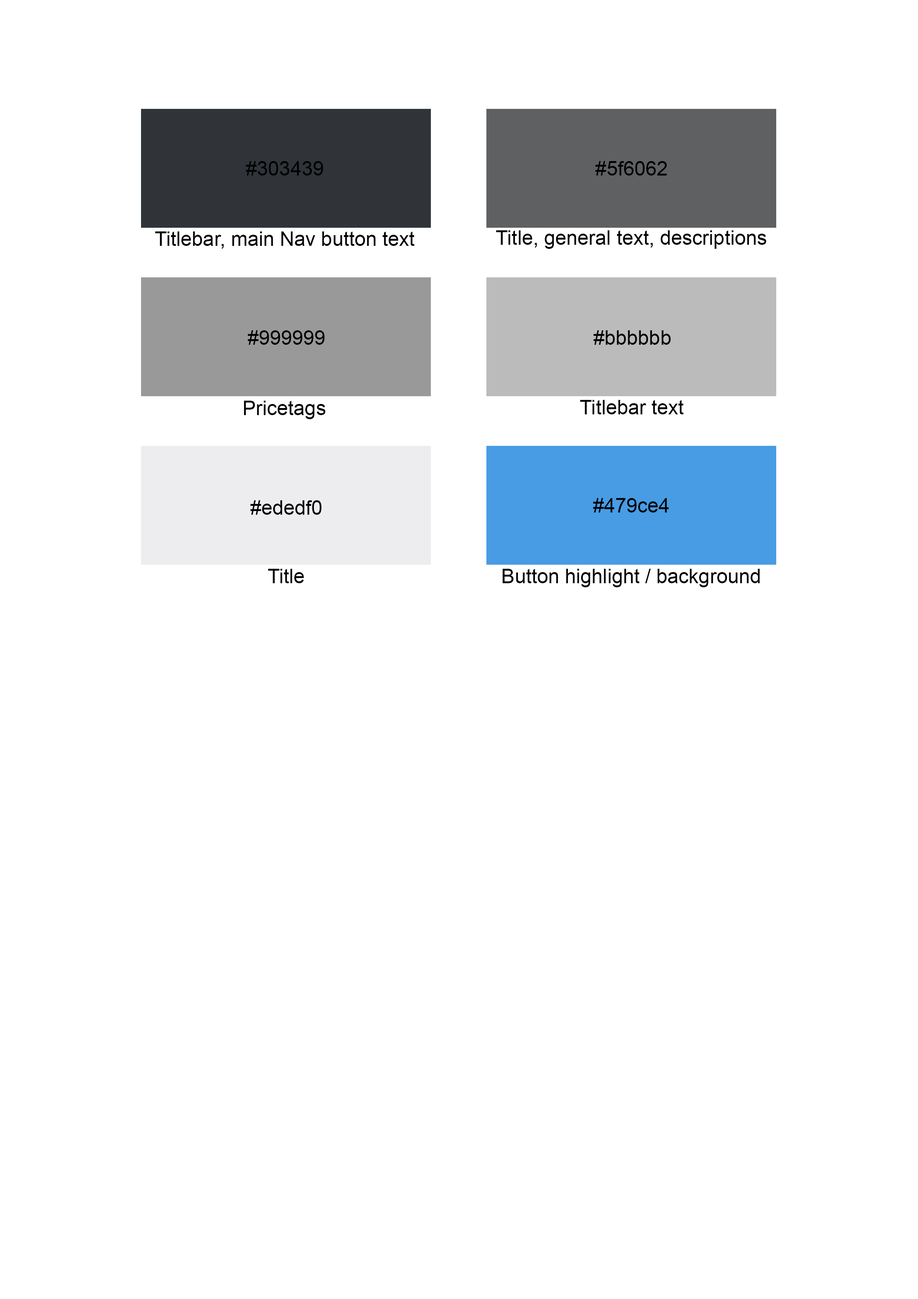
<style>
.page{position:relative;width:918px;height:1299px;background:#ffffff}
.page>*{position:absolute;margin:0}
.t1{font:20.1px "ArialMT";color:#000000}
</style>
<div class="page">
<p class="t1" style="left:246px;top:161px;width:77px;height:14px">#303439</p>
<p class="t1" style="left:595px;top:161px;width:72px;height:14px">#5f6062</p>
<p class="t1" style="left:155px;top:231px;width:260px;height:18px">Titlebar, main Nav button text</p>
<p class="t1" style="left:496px;top:230px;width:270px;height:19px">Title, general text, descriptions</p>
<p class="t1" style="left:248px;top:330px;width:77px;height:15px">#999999</p>
<p class="t1" style="left:593px;top:330px;width:78px;height:15px">#bbbbbb</p>
<p class="t1" style="left:244px;top:401px;width:81px;height:18px">Pricetags</p>
<p class="t1" style="left:580px;top:400px;width:104px;height:14px">Titlebar text</p>
<p class="t1" style="left:593px;top:498px;width:76px;height:14px">#479ce4</p>
<p class="t1" style="left:250px;top:500px;width:72px;height:15px">#ededf0</p>
<p class="t1" style="left:268px;top:569px;width:36px;height:14px">Title</p>
<p class="t1" style="left:502px;top:569px;width:258px;height:18px">Button highlight / background</p>
</div>
